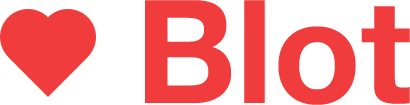
<style>
.page{position:relative;width:410px;height:105px;background:#ffffff}
.page>*{position:absolute;margin:0}
.t1{font:144px "HelveticaNeue-Bold";color:#f03c3c}
</style>
<div class="page">
<p class="t1" style="left:145px;top:0px;width:265px;height:105px">Blot</p>
</div>
